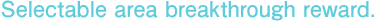
<style>
.page{position:relative;width:377px;height:23px;background:#ffffff}
.page>*{position:absolute;margin:0}
.t1{font:22px "FutoGoB101Pr5-Bold";color:#5fcdd9}
</style>
<div class="page">
<p class="t1" style="left:1px;top:0px;width:373px;height:21px">Selectable area breakthrough reward.</p>
</div>
